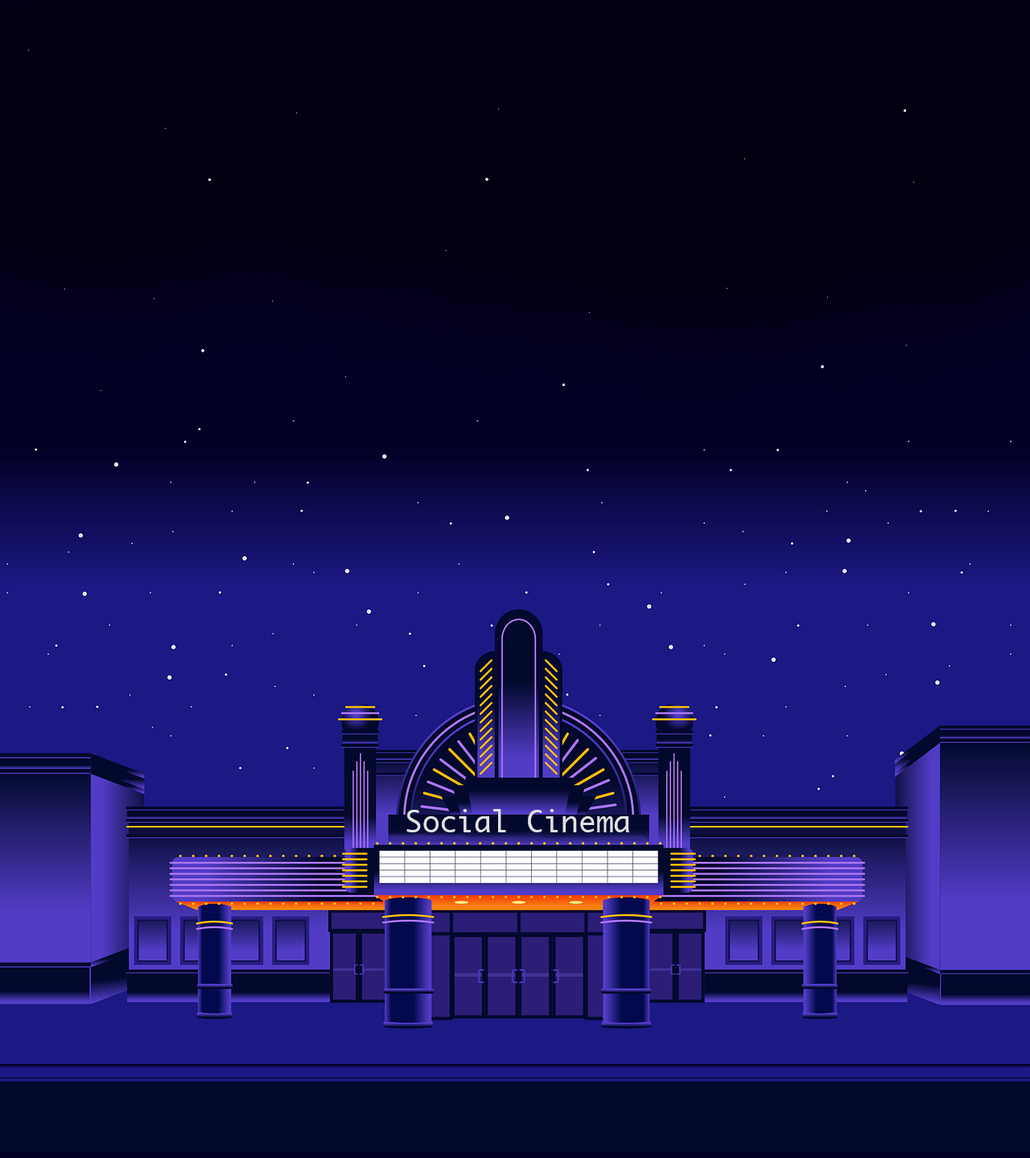
<style>
.page{position:relative;width:1030px;height:1158px}
.page>*{position:absolute;margin:0}
.t1{font:29px "Monaco";color:#e1e2e5}
</style>
<div class="page">
<p class="t1" style="left:406px;top:809px;width:223px;height:23px">Social Cinema</p>
</div>
